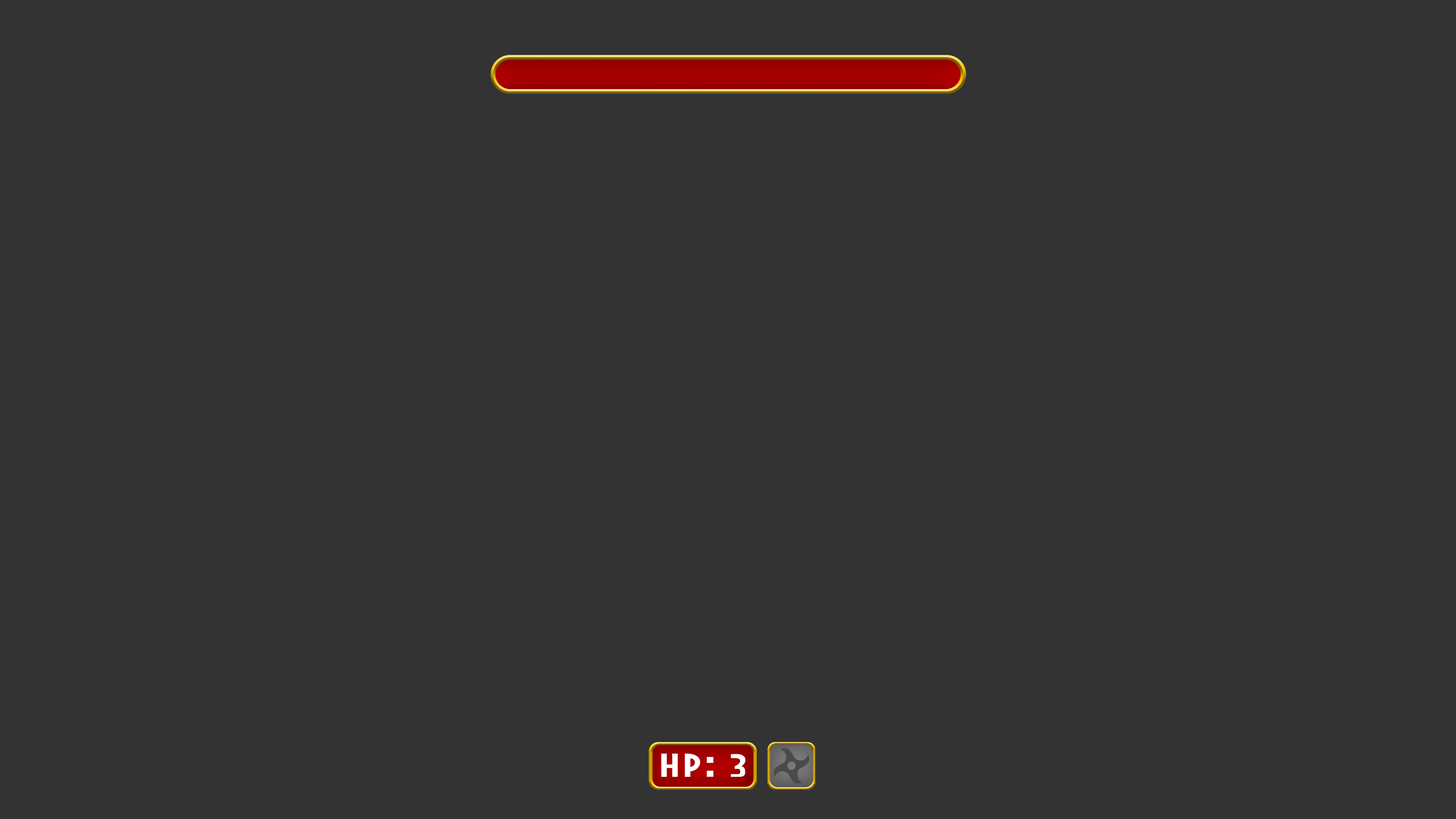
<style>
.page{position:relative;width:1456px;height:819px;background:#333333}
.page>*{position:absolute;margin:0}
.t1{font:30px "Mufuckat";letter-spacing:0.1em;color:#ffffff}
</style>
<div class="page">
<p class="t1" style="left:661px;top:753px;width:84px;height:24px">HP: 3</p>
</div>
